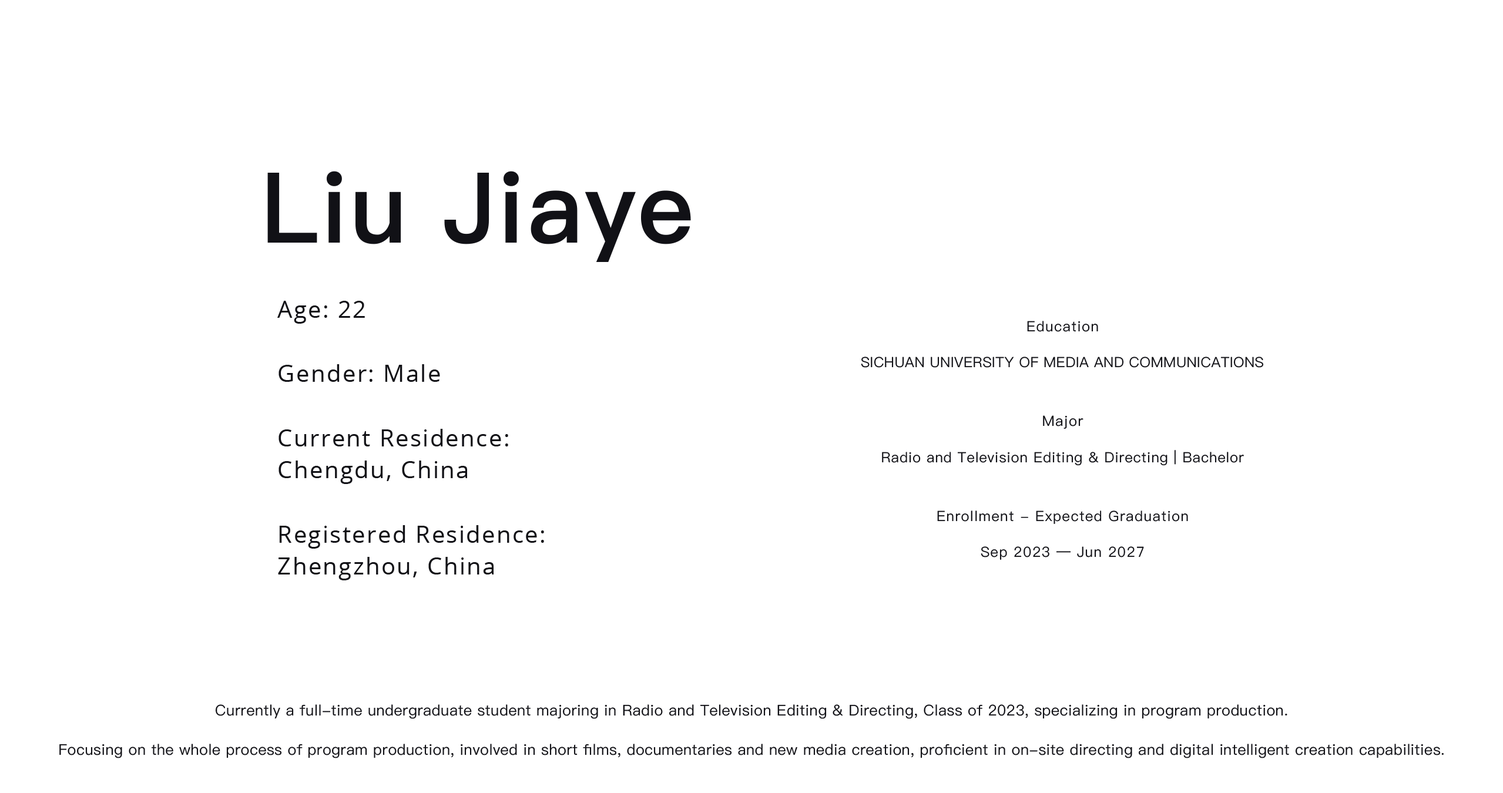
<style>
.page{position:relative;width:1503px;height:793px;background:#ffffff}
.page>*{position:absolute;margin:0}
.t1{font:97.9px "PingFang-SC-Heavy";letter-spacing:0.02em;color:#111116}
.t2{font:23.5px/32.1px "OpenSans";letter-spacing:0.06em;color:#111116}
.t3{font:14.1px/36px "PingFang-SC-Medium";letter-spacing:0.06em;color:#111116}
.t4{font:14.1px/36px "PingFang-SC-Medium";letter-spacing:0.02em;color:#111116}
.t5{font:14.1px/36px "PingFang-SC-Medium";letter-spacing:0.04em;color:#111116}
.t6{font:14.9px/39.2px "PingFang-SC-Medium";letter-spacing:0.02em;color:#111116}
</style>
<div class="page">
<p class="t1" style="left:267px;top:171px;width:424px;height:91px">Liu Jiaye</p>
<p class="t2" style="left:277px;top:301px;width:267px;height:280px">Age: 22<br><br>Gender: Male<br><br>Current Residence: <br>Chengdu, China<br><br>Registered Residence:<br>Zhengzhou, China</p>
<p class="t3" style="left:861px;top:321px;width:403px;height:239px;text-align:center">Education<br><span class="t4">SICHUAN UNIVERSITY OF MEDIA AND COMMUNICATIONS<br><br></span>Major<br><span class="t5">Radio and Television Editing &amp; Directing | Bachelor<br><br></span>Enrollment - Expected Graduation<br>Sep 2023 — Jun 2027</p>
<p class="t6" style="left:59px;top:705px;width:1385px;height:54px;text-align:center">Currently a full-time undergraduate student majoring in Radio and Television Editing &amp; Directing, Class of 2023, specializing in program production.<br>Focusing on the whole process of program production, involved in short films, documentaries and new media creation, proficient in on-site directing and digital intelligent creation capabilities.</p>
</div>
